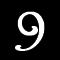
<style>
.page{position:relative;width:60px;height:60px;background:#000000}
.page>*{position:absolute;margin:0}
.t1{font:54px "Harrington";color:#ffffff;font-weight:bold;scale:1.08 1}
</style>
<div class="page">
<p class="t1" style="left:15px;top:11px;width:30px;height:40px">9</p>
</div>
